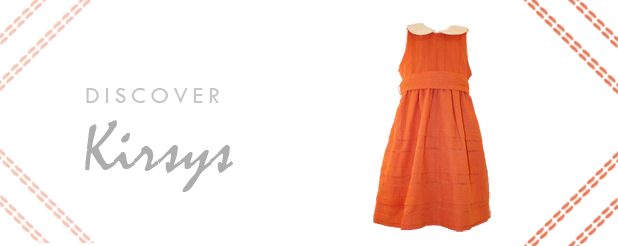
<style>
.page{position:relative;width:618px;height:246px;background:#ffffff}
.page>*{position:absolute;margin:0}
.t1{font:24px "TwCenMT-Regular";letter-spacing:0.2em;color:#c6c6c6}
.t2{font:72px "Mistral";color:#aeadad}
</style>
<div class="page">
<p class="t1" style="left:86px;top:88px;width:133px;height:16px">DISCOVER</p>
<p class="t2" style="left:85px;top:120px;width:148px;height:72px">Kirsys</p>
</div>
